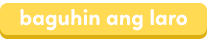
<style>
.page{position:relative;width:207px;height:40px;background:#ffda52}
.page>*{position:absolute;margin:0}
.t1{font:22px "Linotte-Bold";color:#ffffff}
</style>
<div class="page">
<p class="t1" style="left:20px;top:9px;width:167px;height:22px">baguhin ang laro</p>
</div>
